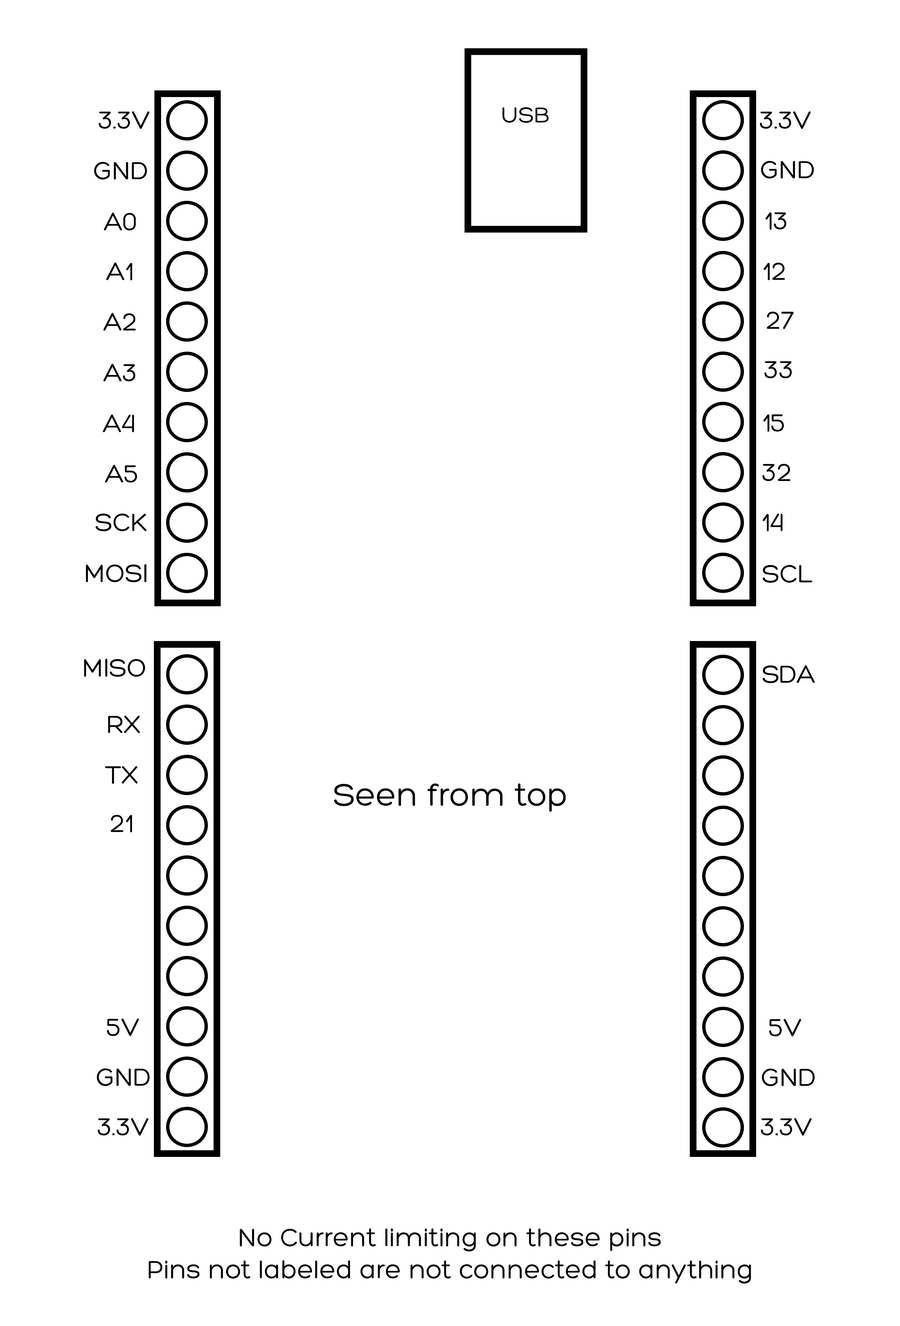
<style>
.page{position:relative;width:900px;height:1326px;background:#ffffff}
.page>*{position:absolute;margin:0}
.t1{font:26.7px "Hero";color:#000000}
.t2{font:23.4px "Hero";color:#000000}
.t3{font:33.4px "Hero";color:#000000}
</style>
<div class="page">
<p class="t1" style="left:99px;top:111px;width:50px;height:18px">3.3V</p>
<p class="t2" style="left:502px;top:107px;width:46px;height:16px">USB</p>
<p class="t1" style="left:759px;top:111px;width:51px;height:18px">3.3V</p>
<p class="t1" style="left:94px;top:162px;width:53px;height:18px">GND</p>
<p class="t1" style="left:761px;top:161px;width:53px;height:18px">GND</p>
<p class="t1" style="left:104px;top:213px;width:32px;height:17px">A0</p>
<p class="t1" style="left:765px;top:212px;width:21px;height:18px">13</p>
<p class="t1" style="left:106px;top:262px;width:26px;height:18px">A1</p>
<p class="t1" style="left:763px;top:263px;width:21px;height:17px">12</p>
<p class="t1" style="left:103px;top:313px;width:33px;height:18px">A2</p>
<p class="t1" style="left:766px;top:311px;width:27px;height:18px">27</p>
<p class="t1" style="left:103px;top:364px;width:32px;height:17px">A3</p>
<p class="t1" style="left:764px;top:361px;width:27px;height:17px">33</p>
<p class="t1" style="left:103px;top:414px;width:31px;height:18px">A4</p>
<p class="t1" style="left:763px;top:414px;width:21px;height:18px">15</p>
<p class="t1" style="left:105px;top:465px;width:32px;height:18px">A5</p>
<p class="t1" style="left:762px;top:464px;width:28px;height:17px">32</p>
<p class="t1" style="left:96px;top:513px;width:50px;height:18px">SCK</p>
<p class="t1" style="left:762px;top:513px;width:20px;height:18px">14</p>
<p class="t1" style="left:86px;top:564px;width:60px;height:18px">MOSI</p>
<p class="t1" style="left:762px;top:565px;width:50px;height:18px">SCL</p>
<p class="t1" style="left:84px;top:659px;width:61px;height:18px">MISO</p>
<p class="t1" style="left:762px;top:665px;width:52px;height:18px">SDA</p>
<p class="t1" style="left:108px;top:715px;width:32px;height:18px">RX</p>
<p class="t1" style="left:105px;top:766px;width:33px;height:18px">TX</p>
<p class="t3" style="left:334px;top:783px;width:232px;height:29px">Seen from top</p>
<p class="t1" style="left:111px;top:815px;width:21px;height:17px">21</p>
<p class="t1" style="left:107px;top:1018px;width:32px;height:18px">5V</p>
<p class="t1" style="left:769px;top:1018px;width:32px;height:18px">5V</p>
<p class="t1" style="left:97px;top:1068px;width:53px;height:18px">GND</p>
<p class="t1" style="left:761px;top:1068px;width:53px;height:18px">GND</p>
<p class="t1" style="left:98px;top:1118px;width:50px;height:17px">3.3V</p>
<p class="t1" style="left:760px;top:1118px;width:51px;height:17px">3.3V</p>
<p class="t1" style="left:149px;top:1228px;width:602px;height:55px;text-align:center">No Current limiting on these pins<br>Pins not labeled are not connected to anything</p>
</div>
